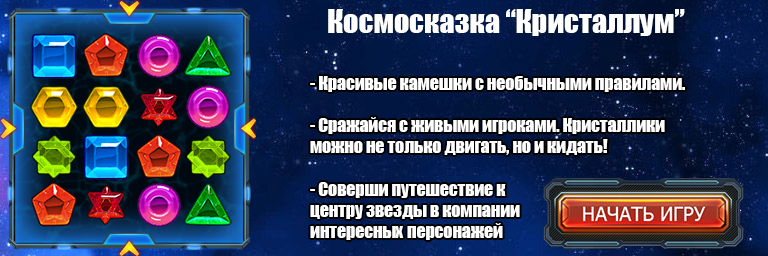
<style>
.page{position:relative;width:768px;height:256px}
.page>*{position:absolute;margin:0}
.t1{font:30px "Impact";color:#ffffff}
.t2{font:17.7px "Impact";color:#ffffff}
</style>
<div class="page">
<p class="t1" style="left:328px;top:9px;width:357px;height:27px">Космосказка “Кристаллум”</p>
<p class="t2" style="left:310px;top:76px;width:375px;height:164px;text-align:right">- Красивые камешки с необычными правилами. <br><br>- Сражайся с живыми игроками. Кристаллики <br>можно не только двигать, но и кидать!<br><br>- Соверши путешествие к <br>центру звезды в компании <br>интересных персонажей</p>
</div>
